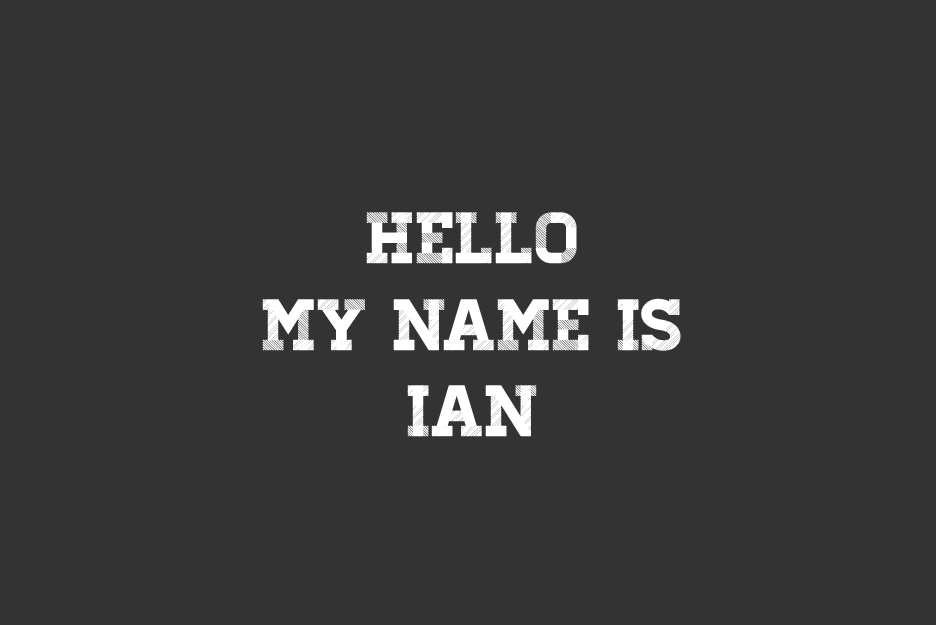
<style>
.page{position:relative;width:936px;height:625px;background:#333333}
.page>*{position:absolute;margin:0}
.t1{font:72px "Homestead-Display";color:#ffffff}
</style>
<div class="page">
<p class="t1" style="left:262px;top:212px;width:419px;height:225px;text-align:center">Hello<br>My Name is<br>Ian</p>
</div>
